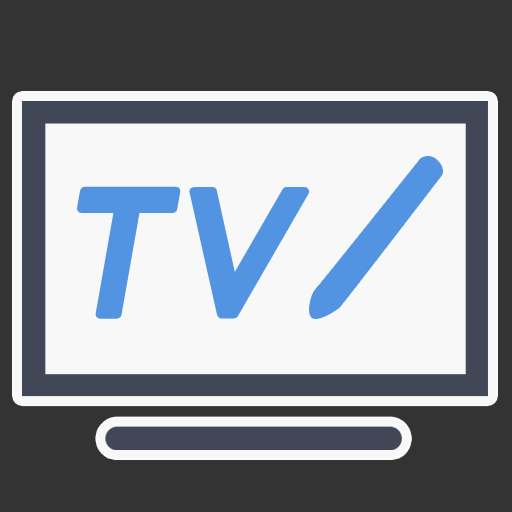
<style>
.page{position:relative;width:512px;height:512px;background:#f8f8f8}
.page>*{position:absolute;margin:0}
.t1{font:175.7px "Code-Bold";letter-spacing:0.1em;color:#5294e2;font-style:italic}
</style>
<div class="page">
<p class="t1" style="left:81px;top:190px;width:225px;height:125px">TV</p>
</div>
